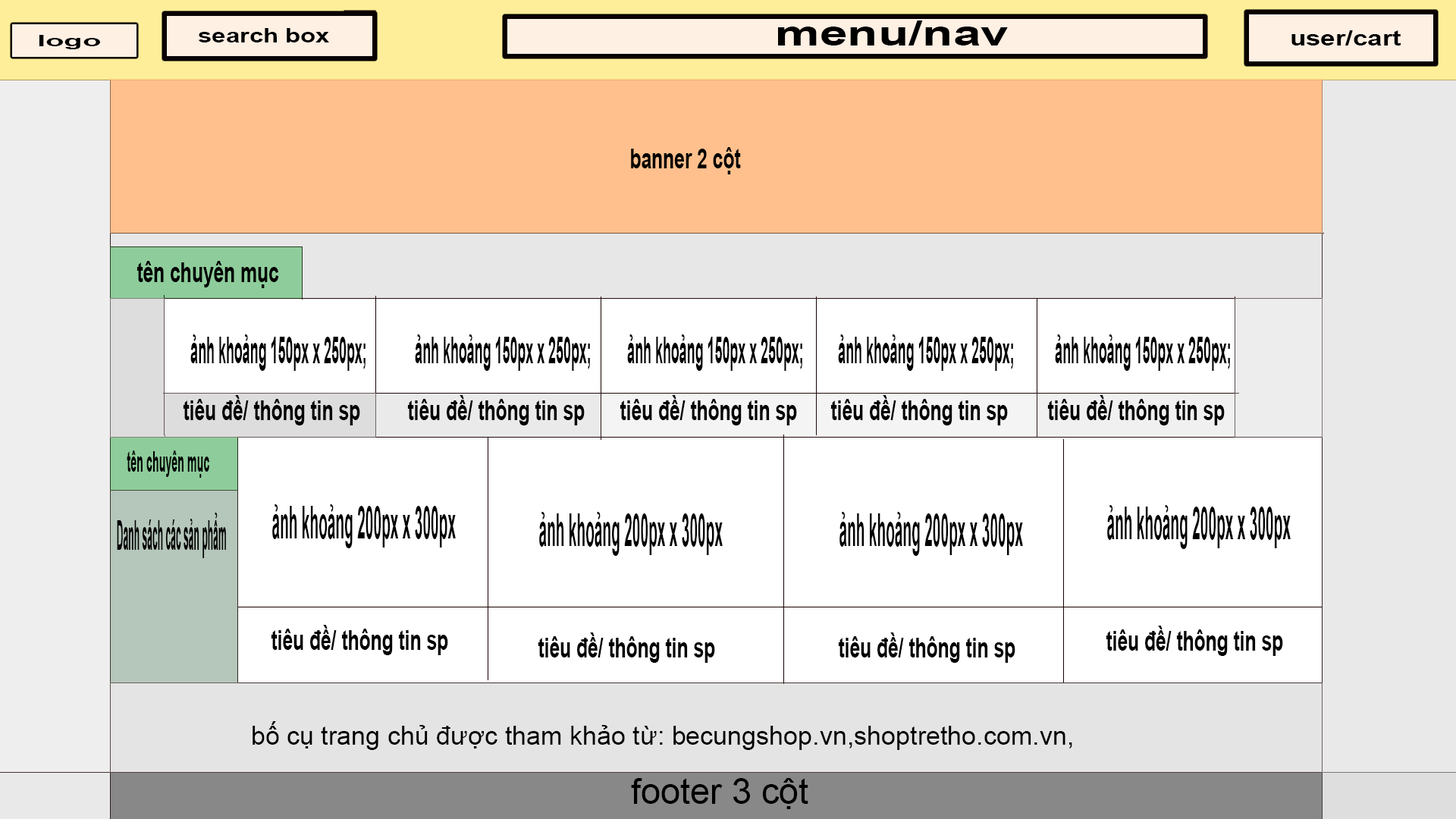
<style>
.page{position:relative;width:1456px;height:819px;background:#ffffff}
.page>*{position:absolute;margin:0}
.t1{font:19.7px "Arial-BoldMT";color:#000000;scale:1.27 1}
.t2{font:35px "Arial-BoldMT";color:#000000;scale:1.43 1}
.t3{font:15.1px "Arial-BoldMT";color:#000000;scale:2.02 1}
.t4{font:21.2px "Arial-BoldMT";color:#000000;scale:1.25 1}
.t5{font:27.3px "Arial-BoldMT";color:#000000;scale:0.68 1}
.t6{font:37.3px "Arial-BoldMT";color:#000000;scale:0.36 1}
.t7{font:28.1px "Arial-BoldMT";color:#000000;scale:0.39 1}
.t8{font:45.8px "Arial-BoldMT";color:#000000;scale:0.32 1}
.t9{font:41.1px "Arial-BoldMT";color:#000000;scale:0.22 1}
.t10{font:25.8px "ArialMT";color:#000000}
.t11{font:35.6px "ArialMT";color:#000000}
</style>
<div class="page">
<p class="t1" style="left:198px;top:28px;width:131px;height:14px">search box</p>
<p class="t2" style="left:778px;top:20px;width:230px;height:25px">menu/nav</p>
<p class="t3" style="left:39px;top:35px;width:61px;height:14px">logo</p>
<p class="t4" style="left:1291px;top:30px;width:110px;height:15px">user/cart</p>
<p class="t5" style="left:631px;top:147px;width:110px;height:27px">banner 2 cột</p>
<p class="t5" style="left:136px;top:261px;width:143px;height:27px">tên chuyên mục</p>
<p class="t6" style="left:190px;top:334px;width:176px;height:37px">ảnh khoảng 150px x 250px;</p>
<p class="t6" style="left:415px;top:334px;width:175px;height:37px">ảnh khoảng 150px x 250px;</p>
<p class="t6" style="left:627px;top:334px;width:175px;height:37px">ảnh khoảng 150px x 250px;</p>
<p class="t6" style="left:838px;top:334px;width:175px;height:37px">ảnh khoảng 150px x 250px;</p>
<p class="t6" style="left:1055px;top:334px;width:175px;height:37px">ảnh khoảng 150px x 250px;</p>
<p class="t5" style="left:183px;top:395px;width:177px;height:30px">tiêu đề/ thông tin sp</p>
<p class="t5" style="left:407px;top:395px;width:178px;height:30px">tiêu đề/ thông tin sp</p>
<p class="t5" style="left:620px;top:395px;width:177px;height:30px">tiêu đề/ thông tin sp</p>
<p class="t5" style="left:830px;top:395px;width:178px;height:30px">tiêu đề/ thông tin sp</p>
<p class="t5" style="left:1047px;top:395px;width:178px;height:30px">tiêu đề/ thông tin sp</p>
<p class="t7" style="left:127px;top:450px;width:82px;height:28px">tên chuyên mục</p>
<p class="t8" style="left:272px;top:504px;width:184px;height:44px">ảnh khoảng 200px x 300px</p>
<p class="t8" style="left:1107px;top:505px;width:184px;height:44px">ảnh khoảng 200px x 300px</p>
<p class="t9" style="left:117px;top:513px;width:109px;height:45px">Danh sách các sản phẩm</p>
<p class="t8" style="left:539px;top:512px;width:184px;height:44px">ảnh khoảng 200px x 300px</p>
<p class="t8" style="left:839px;top:512px;width:184px;height:44px">ảnh khoảng 200px x 300px</p>
<p class="t5" style="left:271px;top:625px;width:177px;height:30px">tiêu đề/ thông tin sp</p>
<p class="t5" style="left:1106px;top:626px;width:177px;height:30px">tiêu đề/ thông tin sp</p>
<p class="t5" style="left:538px;top:632px;width:177px;height:31px">tiêu đề/ thông tin sp</p>
<p class="t5" style="left:838px;top:632px;width:177px;height:31px">tiêu đề/ thông tin sp</p>
<p class="t10" style="left:253px;top:721px;width:819px;height:29px">bố cụ trang chủ được tham khảo từ: becungshop.vn,shoptretho.com.vn,</p>
<p class="t11" style="left:631px;top:778px;width:177px;height:31px">footer 3 cột</p>
</div>
